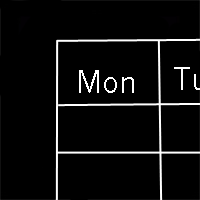
<style>
.page{position:relative;width:200px;height:200px;background:#000000}
.page>*{position:absolute;margin:0}
.t1{font:29.6px "NewsGothic";color:#ffffff}
</style>
<div class="page">
<p class="t1" style="left:79px;top:70px;width:55px;height:23px">Mon</p>
</div>
